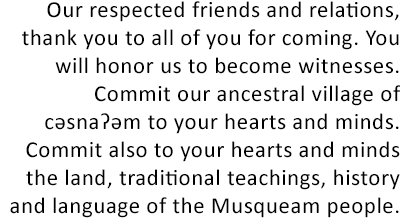
<style>
.page{position:relative;width:400px;height:221px;background:#ffffff}
.page>*{position:absolute;margin:0}
.t1{font:23px/28px "Calibri";letter-spacing:0.023em;color:#000000}
</style>
<div class="page">
<p class="t1" style="left:10px;top:1px;width:391px;height:217px;text-align:right">Our respected friends and relations, thank you to all of you for coming. You will honor us to become witnesses. Commit our ancestral village of c̓əsnaʔəm to your hearts and minds. Commit also to your hearts and minds the land, traditional teachings, history and language of the Musqueam people.</p>
</div>
